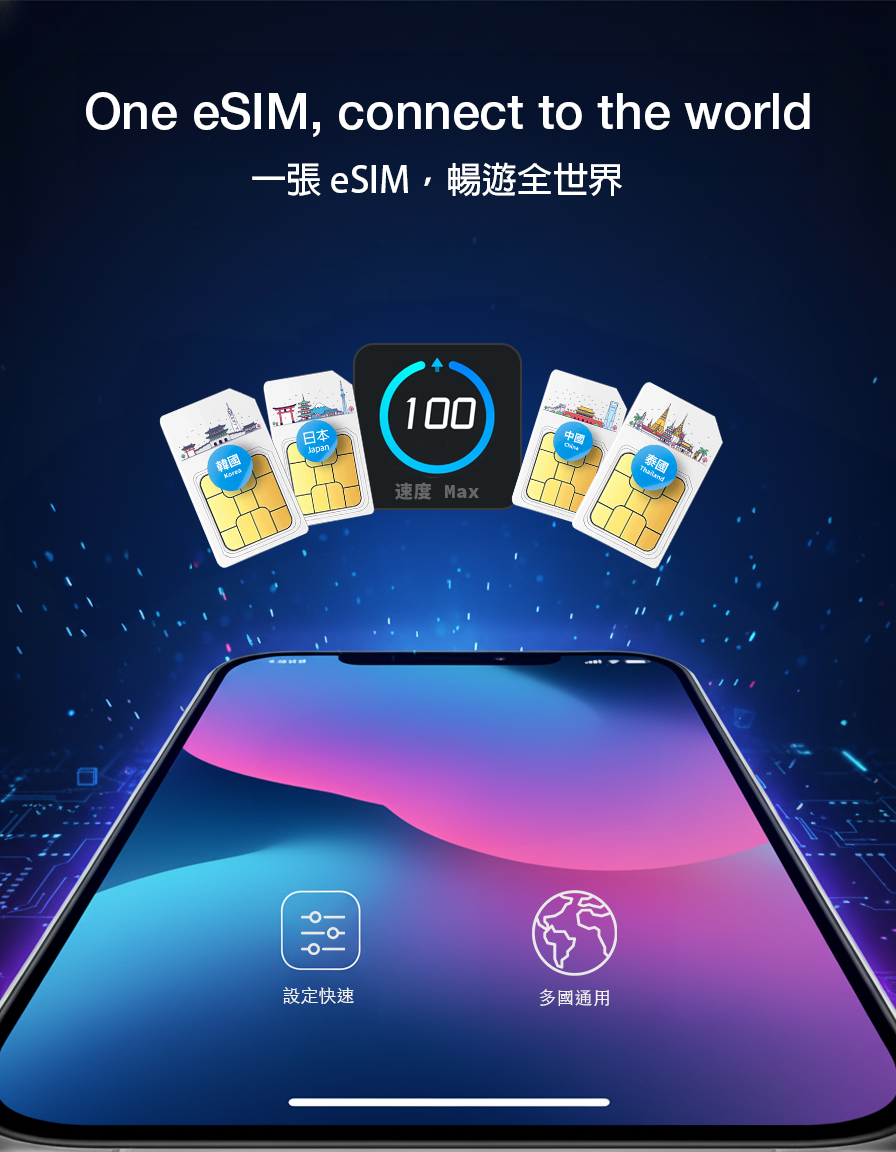
<style>
.page{position:relative;width:896px;height:1152px}
.page>*{position:absolute;margin:0}
.t1{font:49.8px "HelveticaNeueLTPro-Md";color:#ffffff}
.t2{font:35.7px "AdobeFanHeitiStd-Bold";color:#ffffff}
.t3{font:18px "SourceHanMonoSC-Heavy";color:#676767}
.t4{font:18px "STHeitiTC-Light";color:#f1f1f1}
</style>
<div class="page">
<p class="t1" style="left:86px;top:92px;width:724px;height:45px">One eSIM, connect to the world</p>
<p class="t2" style="left:252px;top:162px;width:370px;height:35px">一張 eSIM，暢遊全世界</p>
<p class="t3" style="left:395px;top:482px;width:84px;height:18px">速度 Max</p>
<p class="t4" style="left:283px;top:987px;width:71px;height:17px">設定快速</p>
</div>
